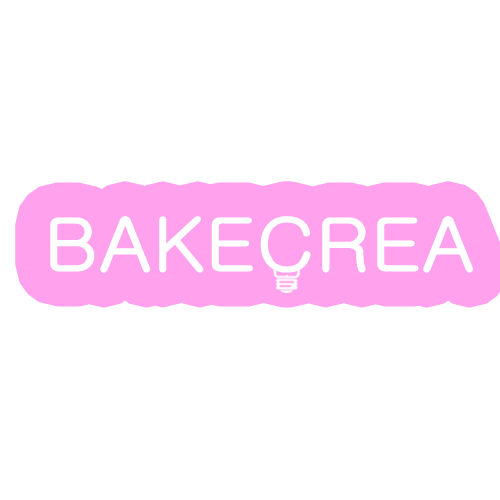
<style>
.page{position:relative;width:500px;height:500px;background:#ffffff}
.page>*{position:absolute;margin:0}
.t1{font:72px "Gulim";color:#ffffff;font-weight:bold;scale:1.1 1}
</style>
<div class="page">
<p class="t1" style="left:50px;top:216px;width:423px;height:57px">BAKECREA</p>
</div>
